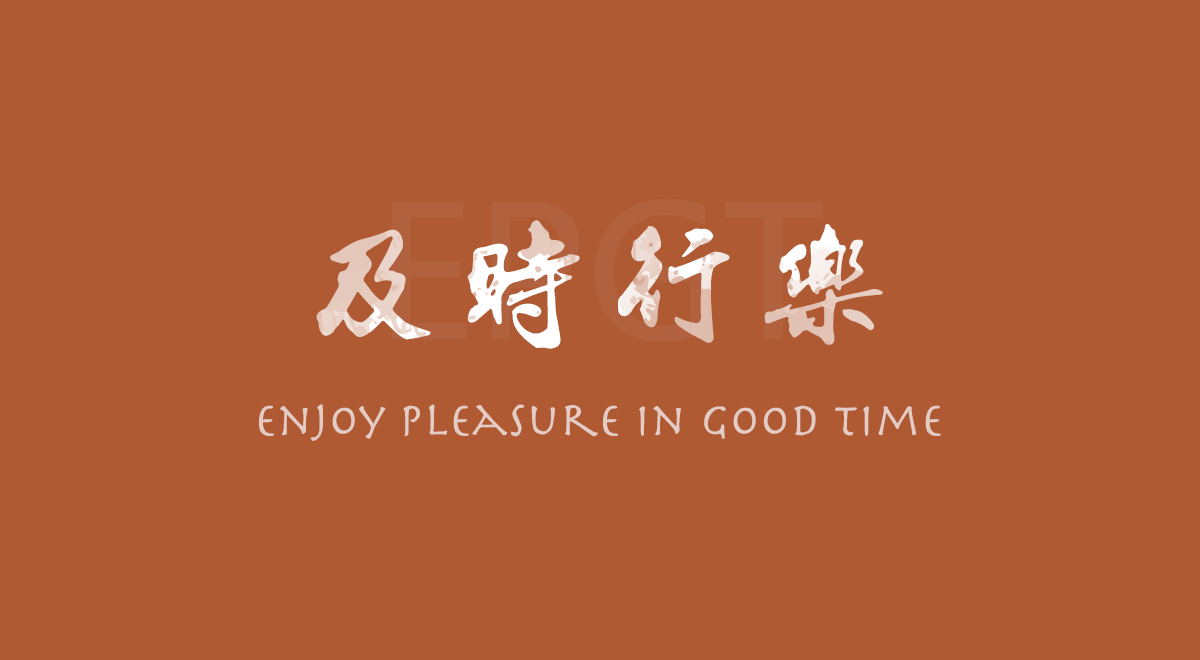
<style>
.page{position:relative;width:1200px;height:660px;background:#af5a33}
.page>*{position:absolute;margin:0}
.t1{font:150px "SunYatsenHsingshu-"}
.t2{font:48px "Herculanum";color:#e4ccc5}
</style>
<div class="page">
<p class="t1" style="left:316px;top:220px;width:567px;height:129px">及时行乐</p>
<p class="t2" style="left:259px;top:404px;width:682px;height:37px">Enjoy Pleasure in Good time</p>
</div>
